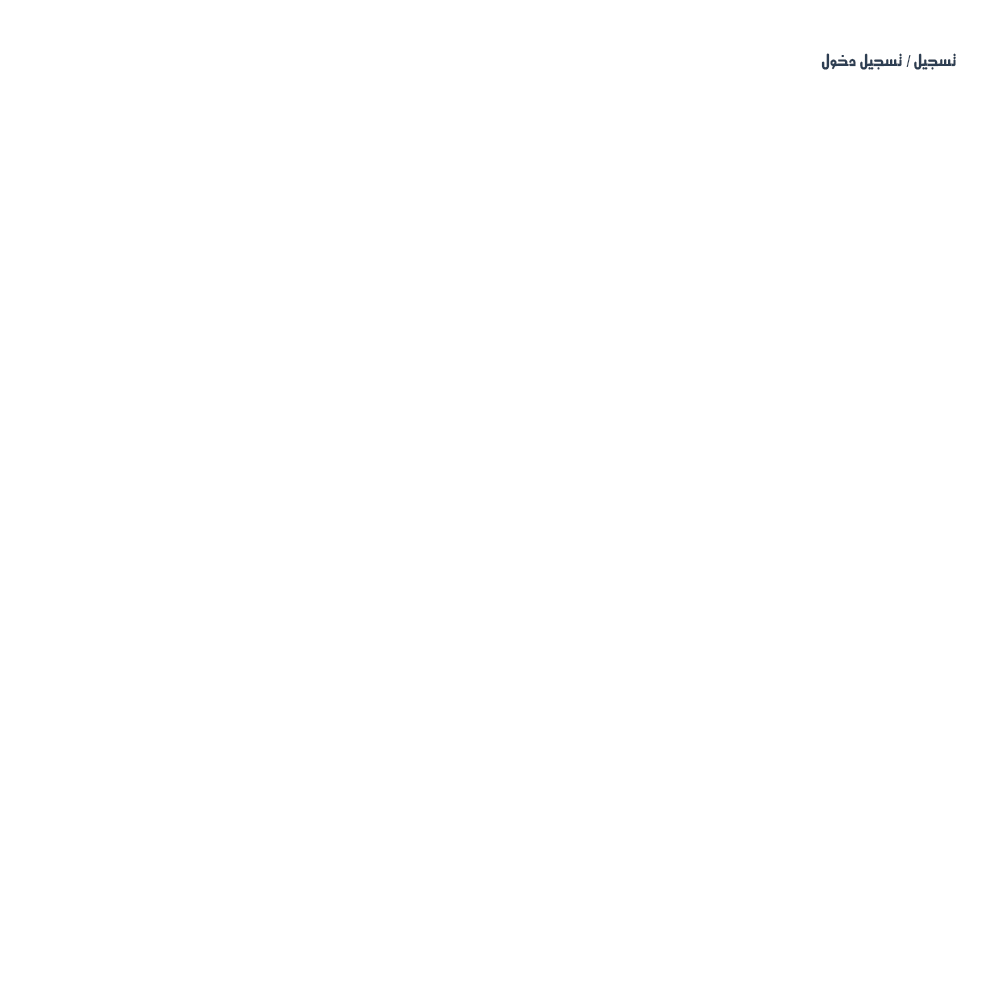
<style>
.page{position:relative;width:1000px;height:1000px;background:#ffffff}
.page>*{position:absolute;margin:0}
.t1{font:15.8px "Motken-Unicode-Anbobi";color:#2d3e52;scale:0.94 1}
</style>
<div class="page">
<p class="t1" style="left:821px;top:53px;width:135px;height:17px">تسجيل / تسجيل دخول</p>
</div>
